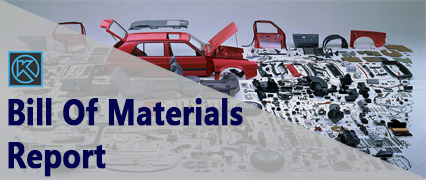
<style>
.page{position:relative;width:426px;height:180px}
.page>*{position:absolute;margin:0}
.t1{font:8.5px "Gadugi-Bold";color:#020452;font-weight:bold;scale:0.83 1}
</style>
<div class="page">
<p class="t1" style="left:8px;top:98px;width:235px;height:79px">Bill Of Materials<br>Report</p>
</div>
